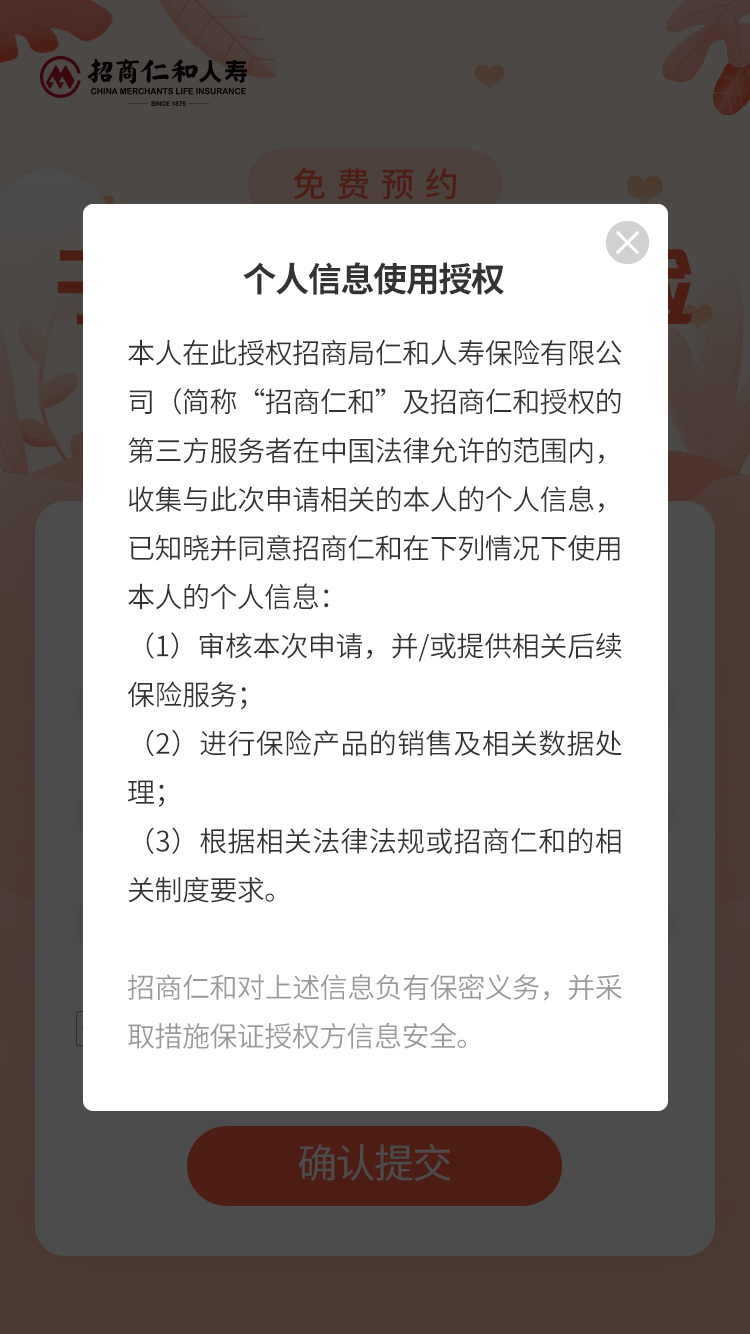
<style>
.page{position:relative;width:750px;height:1334px;background:#ffffff}
.page>*{position:absolute;margin:0}
.t1{font:34px "SourceHanSansCN-Bold";letter-spacing:-0.04em;color:#333333}
.t2{font:28px/48.8px "SourceHanSansCN-Normal";letter-spacing:-0.02em;color:#333333}
.t3{font:28px/48.8px "SourceHanSansCN-Normal";letter-spacing:-0.02em;color:#999999}
</style>
<div class="page">
<p class="t1" style="left:243px;top:262px;width:261px;height:33px">个人信息使用授权</p>
<p class="t2" style="left:127px;top:339px;width:495px;height:710px;text-align:justify">本人在此授权招商局仁和人寿保险有限公司（简称“招商仁和”及招商仁和授权的第三方服务者在中国法律允许的范围内，收集与此次申请相关的本人的个人信息，已知晓并同意招商仁和在下列情况下使用本人的个人信息：<br>（1）审核本次申请，并/或提供相关后续保险服务；<br>（2）进行保险产品的销售及相关数据处理；<br>（3）根据相关法律法规或招商仁和的相关制度要求。<br><span class="t3"><br>招商仁和对上述信息负有保密义务，并采取措施保证授权方信息安全。</span></p>
</div>
